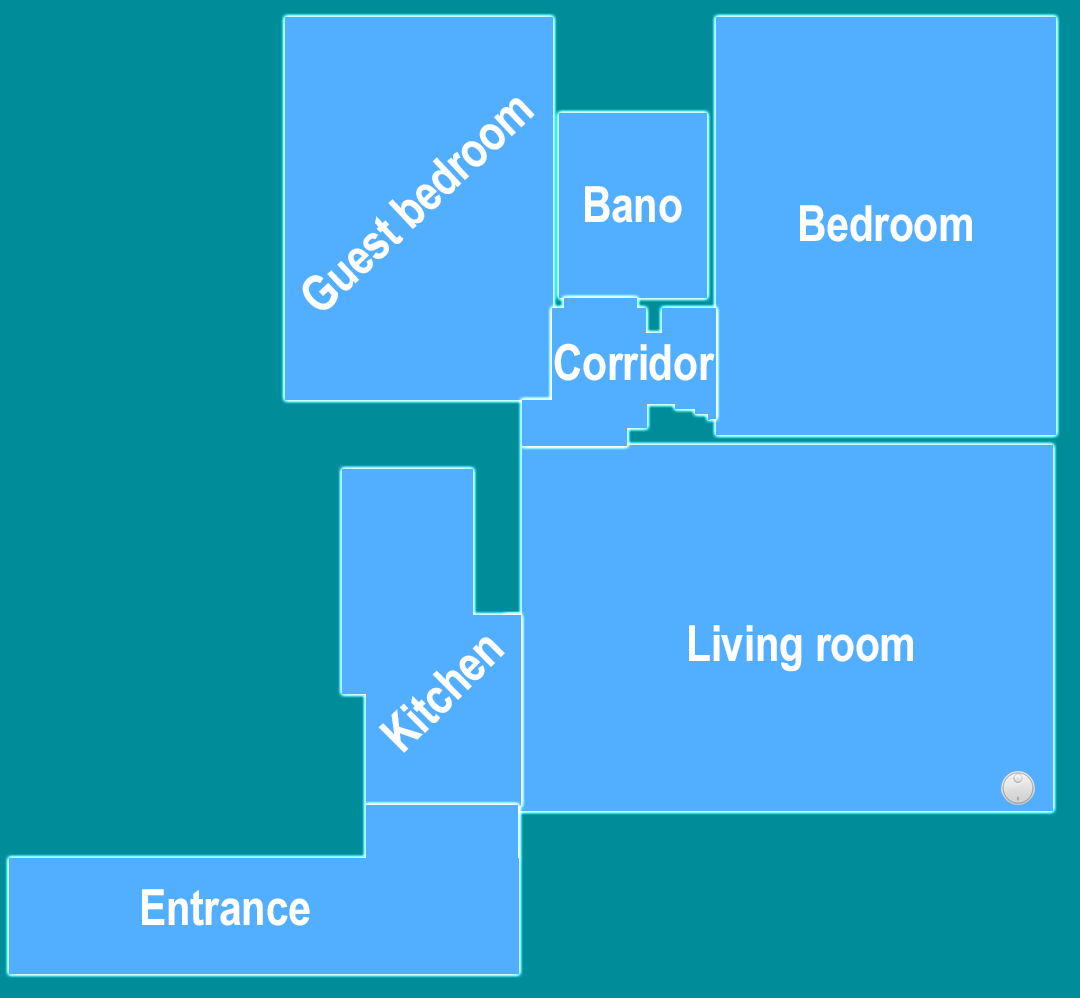
<style>
.page{position:relative;width:1080px;height:998px;background:#52afff}
.page>*{position:absolute;margin:0}
.t1{font:50px "ArialNarrow-Bold";letter-spacing:-0.01em;color:#ffffff}
.t2{font:50px "ArialNarrow-Bold";letter-spacing:-0.01em;color:#fefefe}
</style>
<div class="page">
<p class="t1" style="left:302px;top:98px;width:233px;height:212px;rotate:-43deg">Guest bedroom</p>
<p class="t1" style="left:585px;top:186px;width:97px;height:37px">Bano</p>
<p class="t1" style="left:800px;top:205px;width:172px;height:37px">Bedroom</p>
<p class="t2" style="left:554px;top:343px;width:161px;height:38px">Corridor</p>
<p class="t1" style="left:689px;top:625px;width:224px;height:47px">Living room</p>
<p class="t1" style="left:378px;top:637px;width:127px;height:116px;rotate:-45deg">Kitchen</p>
<p class="t1" style="left:142px;top:889px;width:168px;height:37px">Entrance</p>
</div>
